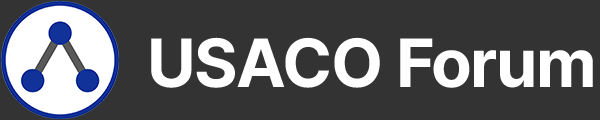
<style>
.page{position:relative;width:600px;height:120px;background:#333333}
.page>*{position:absolute;margin:0}
.t1{font:66.7px "Inter-Bold";letter-spacing:-0.02em;color:#ffffff}
</style>
<div class="page">
<p class="t1" style="left:151px;top:37px;width:442px;height:51px">USACO Forum</p>
</div>
